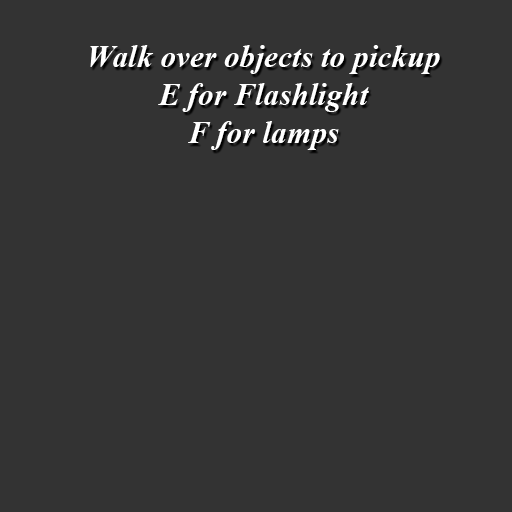
<style>
.page{position:relative;width:512px;height:512px;background:#333333}
.page>*{position:absolute;margin:0}
.t1{font:31.4px "TimesNewRomanPS-BoldItalicMT";color:#ffffff}
</style>
<div class="page">
<p class="t1" style="left:90px;top:45px;width:350px;height:105px;text-align:center">Walk over objects to pickup<br>E for Flashlight<br>F for lamps</p>
</div>
